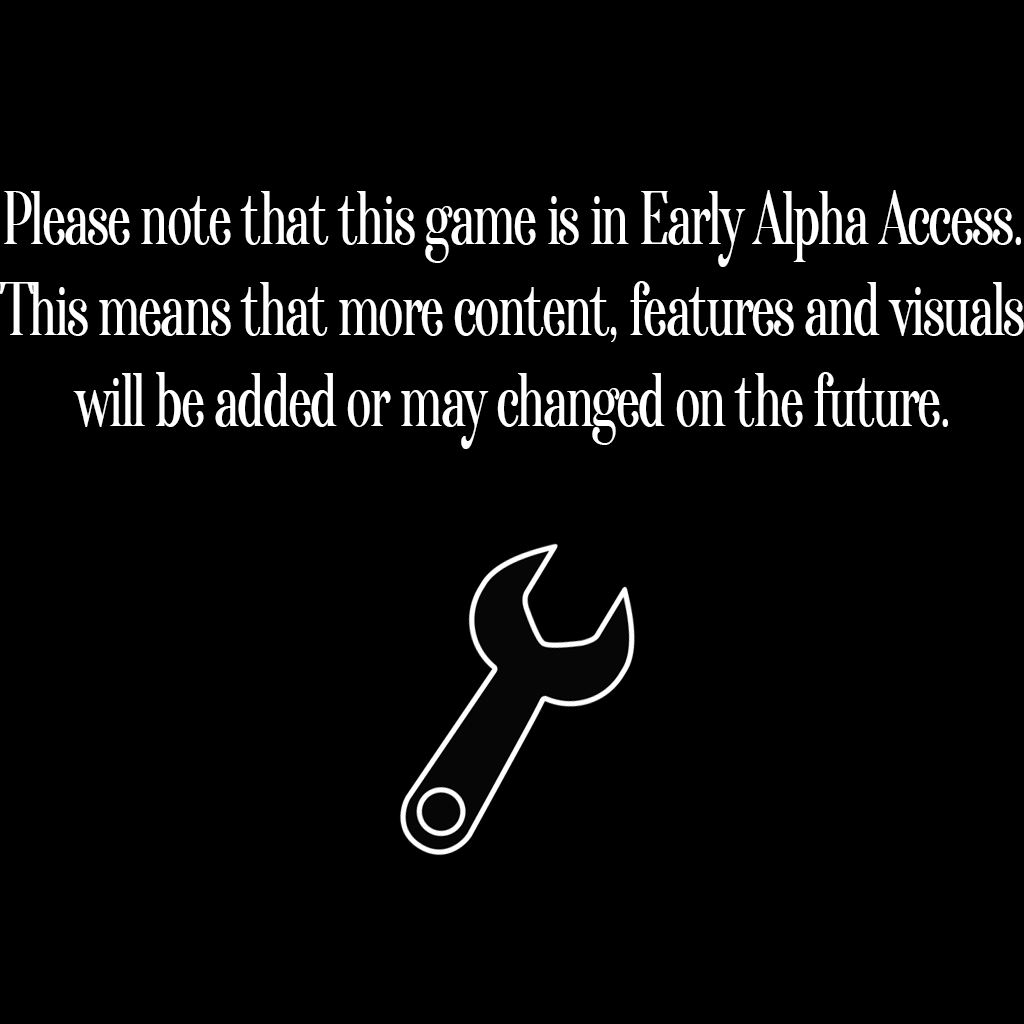
<style>
.page{position:relative;width:1024px;height:1024px;background:#000000}
.page>*{position:absolute;margin:0}
.t1{font:76px "Afterglow-Regular";color:#ffffff;scale:0.62 1}
</style>
<div class="page">
<p class="t1" style="left:0px;top:190px;width:1024px;height:259px;text-align:center">Please note that this game is in Early Alpha Access.<br>This means that more content, features and visuals<br>will be added or may changed on the future.</p>
</div>
